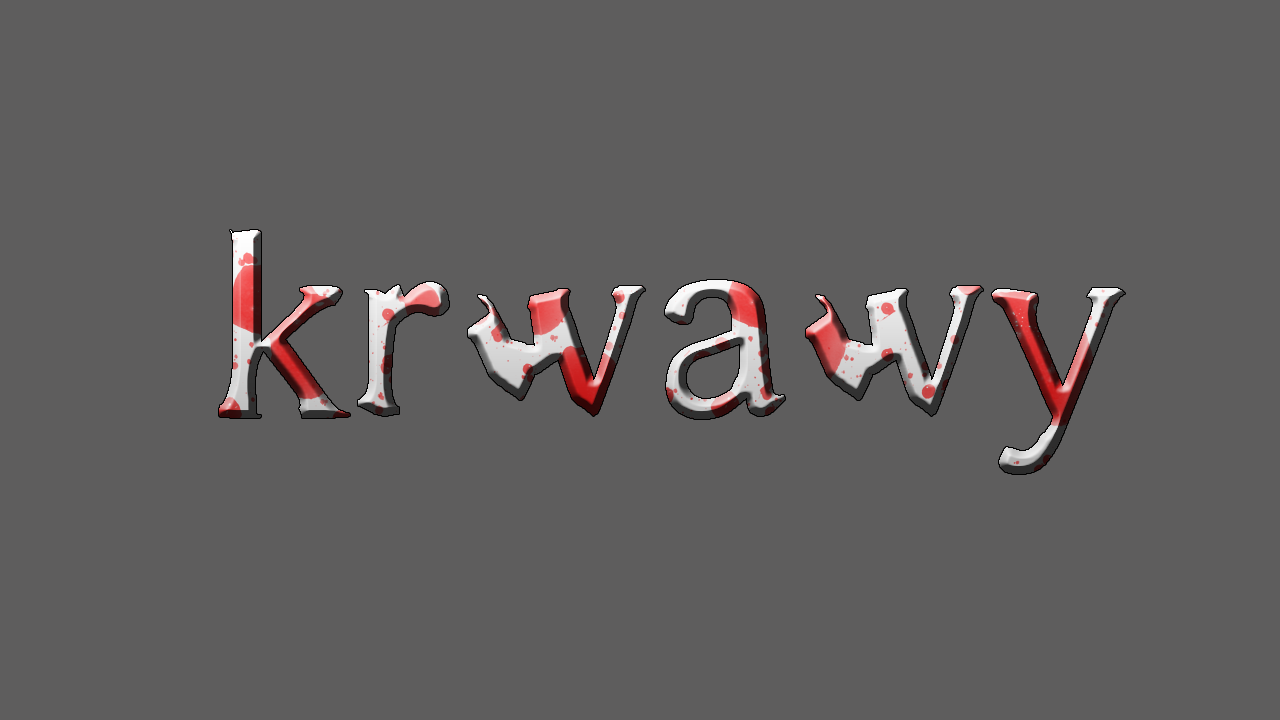
<style>
.page{position:relative;width:1280px;height:720px;background:#5e5d5d}
.page>*{position:absolute;margin:0}
.t1{font:300px "ShadowsAroundUs"}
</style>
<div class="page">
<p class="t1" style="left:219px;top:230px;width:906px;height:244px">krwawy</p>
</div>
